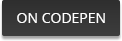
<style>
.page{position:relative;width:122px;height:41px}
.page>*{position:absolute;margin:0}
.t1{font:14px "OpenSans";color:#ffffff}
</style>
<div class="page">
<p class="t1" style="left:17px;top:13px;width:88px;height:10px">ON CODEPEN</p>
</div>
